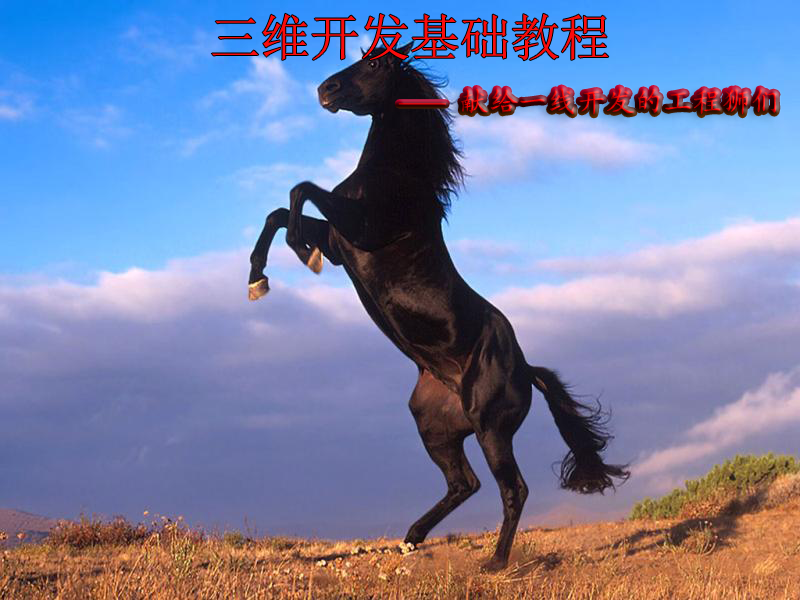
<style>
.page{position:relative;width:800px;height:600px}
.page>*{position:absolute;margin:0}
.t1{font:50px "SimSun";color:#fb0c0c}
.t2{font:29.2px "STKaiti"}
.t3{font:18.8px "STKaiti"}
</style>
<div class="page">
<p class="t1" style="left:211px;top:13px;width:398px;height:48px">三维开发基础教程</p>
<p class="t2" style="left:461px;top:88px;width:316px;height:27px">献给一线开发的工程狮们</p>
<p class="t3" style="left:398px;top:103px;width:48px;height:2px">_____</p>
</div>
